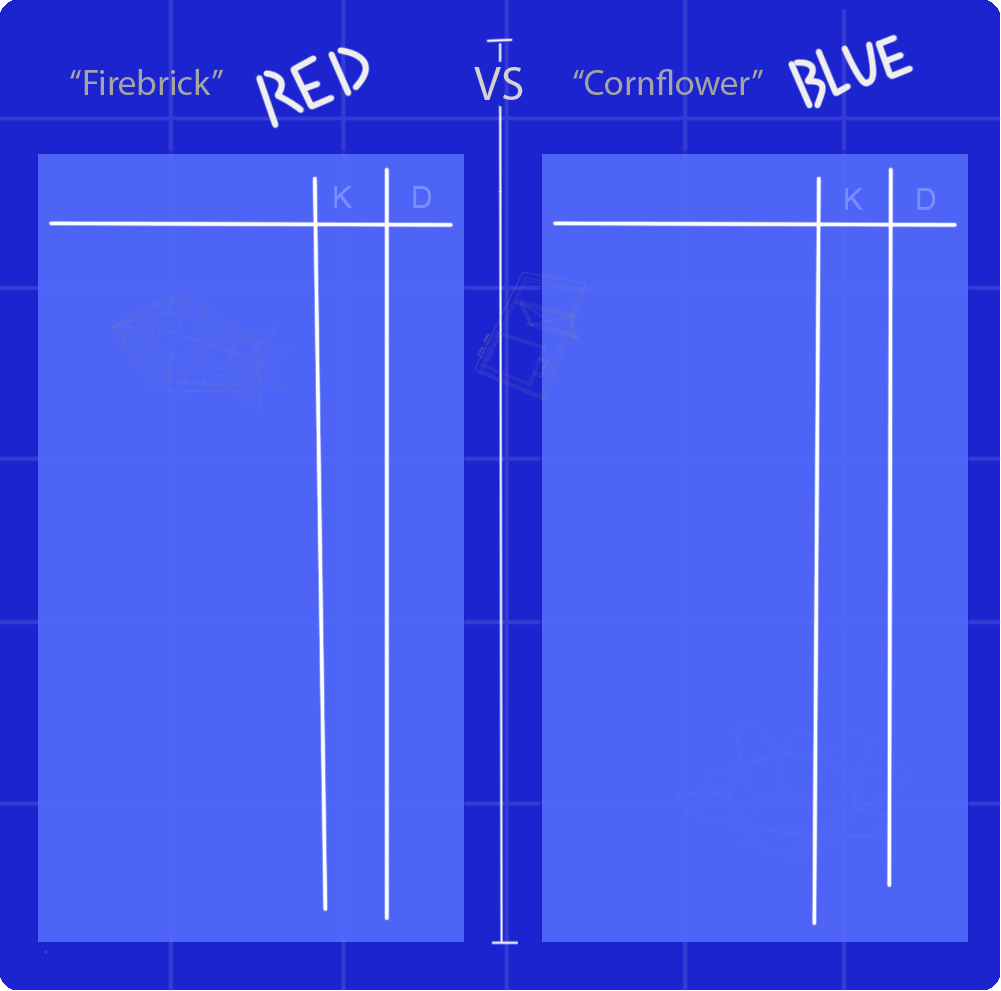
<style>
.page{position:relative;width:1001px;height:991px;background:#4e64f6}
.page>*{position:absolute;margin:0}
.t1{font:36px "MyriadPro-Regular";color:#a4a4a2}
.t2{font:48px "MyriadPro-Regular";color:#d2d2d2}
.t3{font:30px "ArialMT";color:#788dff}
</style>
<div class="page">
<p class="t1" style="left:70px;top:69px;width:153px;height:26px">“Firebrick”</p>
<p class="t2" style="left:474px;top:67px;width:49px;height:33px">VS</p>
<p class="t1" style="left:573px;top:69px;width:190px;height:26px">“Cornflower”</p>
<p class="t3" style="left:334px;top:186px;width:18px;height:22px">K</p>
<p class="t3" style="left:413px;top:186px;width:19px;height:22px">D</p>
<p class="t3" style="left:845px;top:188px;width:18px;height:22px">K</p>
<p class="t3" style="left:917px;top:188px;width:19px;height:22px">D</p>
</div>
